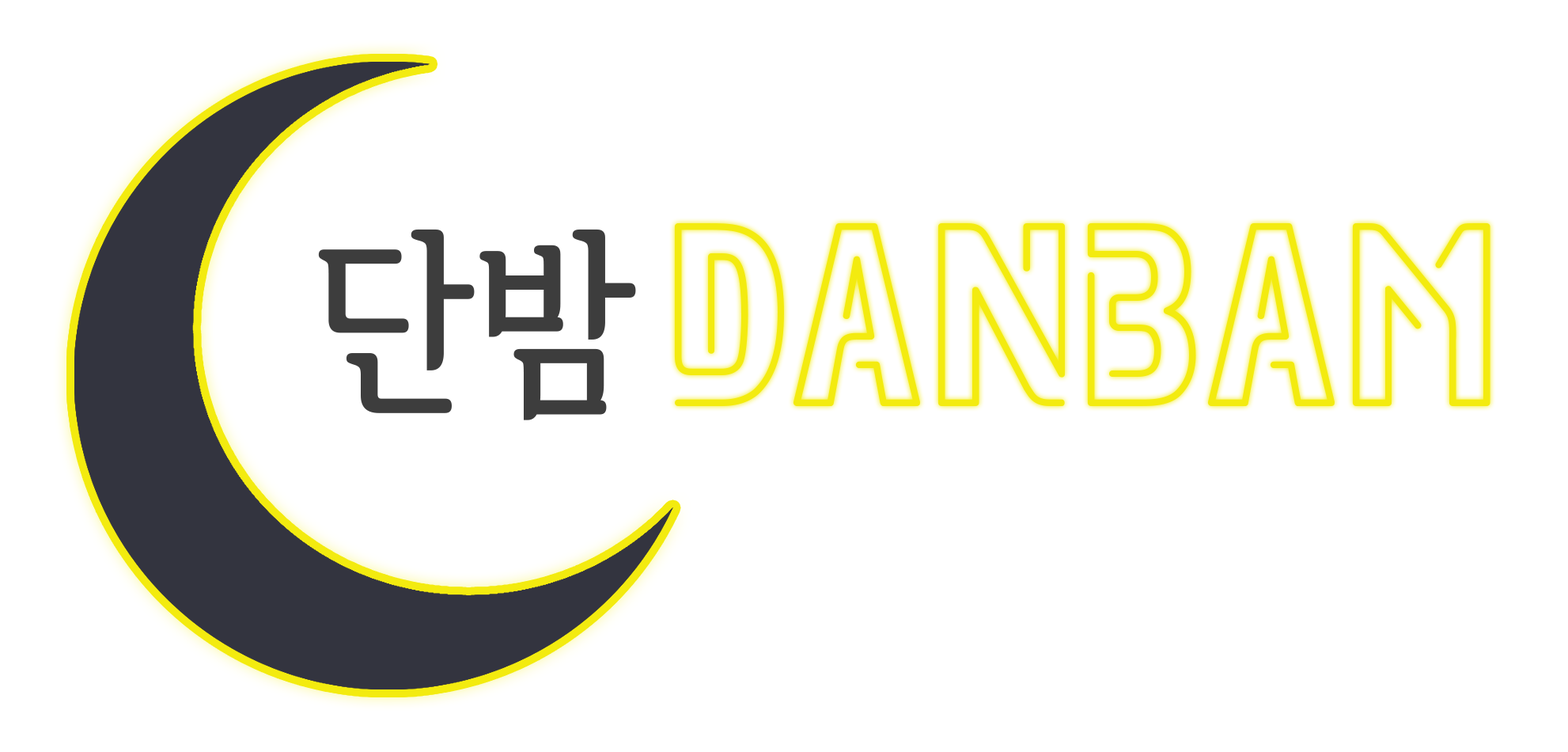
<style>
.page{position:relative;width:1568px;height:752px;background:#ffffff}
.page>*{position:absolute;margin:0}
.t1{font:198.5px "SeH-CB";color:#3d3d3d}
.t2{font:228.9px "Neoneon";color:#f3eb0f}
</style>
<div class="page">
<p class="t1" style="left:318px;top:229px;width:318px;height:191px">단밤</p>
<p class="t2" style="left:674px;top:223px;width:816px;height:183px">DanBam</p>
</div>
